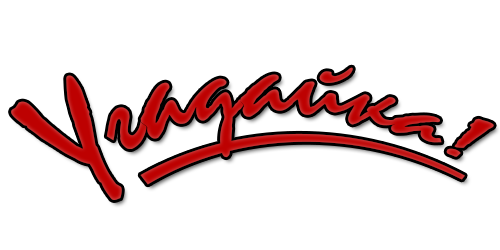
<style>
.page{position:relative;width:500px;height:250px;background:#ffffff}
.page>*{position:absolute;margin:0}
.t1{font:98px "Mistral";color:#c00d0d;text-decoration:underline}
.t2{font:115px "Mistral";color:#c00d0d}
</style>
<div class="page">
<p class="t1" style="left:11px;top:67px;width:483px;height:133px"><span class="t2">У</span>гадайка!</p>
</div>
